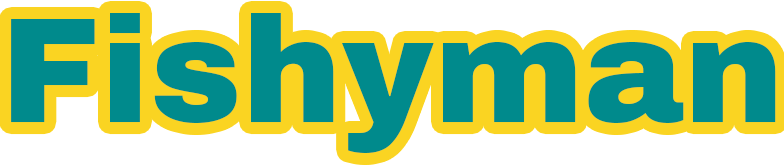
<style>
.page{position:relative;width:784px;height:167px;background:#ffffff}
.page>*{position:absolute;margin:0}
.t1{font:150px "ArchivoBlack-Regular";color:#008a8c}
</style>
<div class="page">
<p class="t1" style="left:11px;top:13px;width:765px;height:140px">Fishyman</p>
</div>
